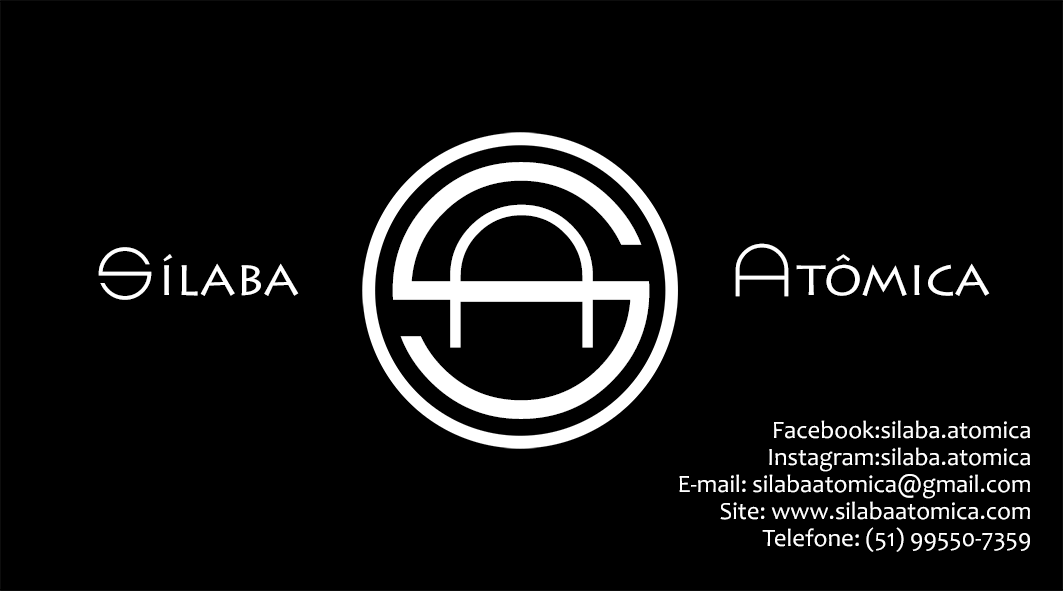
<style>
.page{position:relative;width:1063px;height:591px;background:#000000}
.page>*{position:absolute;margin:0}
.t1{font:375.3px "ZdykLibra";color:#ffffff}
.t2{font:208.5px "ZdykLibra";color:#ffffff}
.t3{font:76.7px "ZdykLibra";color:#ffffff}
.t4{font:50px "LithosPro-Regular";color:#ffffff}
.t5{font:25px/13.5px "Candara";color:#ffffff}
</style>
<div class="page">
<p class="t1" style="left:392px;top:162px;width:258px;height:257px">S</p>
<p class="t2" style="left:450px;top:204px;width:143px;height:144px">A</p>
<p class="t3" style="left:735px;top:243px;width:54px;height:54px">A</p>
<p class="t3" style="left:98px;top:247px;width:54px;height:53px">S</p>
<p class="t4" style="left:163px;top:254px;width:136px;height:42px">ílaba</p>
<p class="t4" style="left:796px;top:254px;width:194px;height:42px">tômica</p>
<p class="t5" style="left:679px;top:420px;width:351px;height:132px;text-align:right">Facebook:silaba.atomica<br><br>Instagram:silaba.atomica<br><br>E-mail: silabaatomica@gmail.com<br><br>Site: www.silabaatomica.com<br><br>Telefone: (51) 99550-7359</p>
</div>
